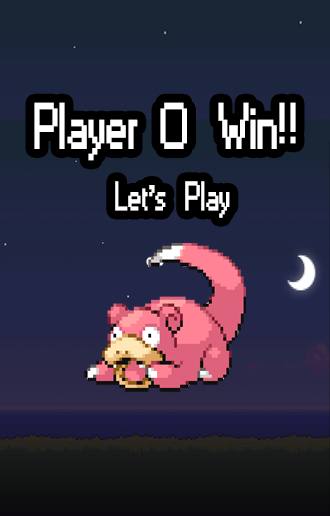
<style>
.page{position:relative;width:330px;height:516px}
.page>*{position:absolute;margin:0}
.t1{font:60.4px "Small Fonts";color:#ffffff;font-weight:bold;scale:0.76 1}
.t2{font:38.2px "Small Fonts";color:#ffffff;font-weight:bold;scale:0.76 1}
</style>
<div class="page">
<p class="t1" style="left:34px;top:102px;width:262px;height:59px">Player   O    Win!!</p>
<p class="t2" style="left:115px;top:181px;width:115px;height:37px">Let’s    Play</p>
</div>
